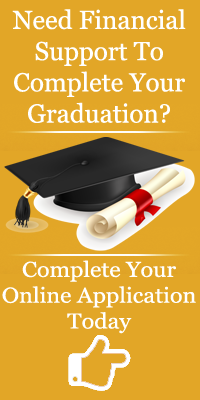
<style>
.page{position:relative;width:200px;height:400px;background:#e2a627}
.page>*{position:absolute;margin:0}
.t1{font:26px "Georgia";color:#ffffff}
.t2{font:21.5px "Georgia";color:#ffffff;scale:1.08 1}
</style>
<div class="page">
<p class="t1" style="left:12px;top:9px;width:174px;height:114px;text-align:center">Need Financial<br>Support To<br>Complete Your<br>Graduation?</p>
<p class="t2" style="left:2px;top:260px;width:194px;height:74px;text-align:center">Complete Your<br>Online Application<br>Today</p>
</div>
